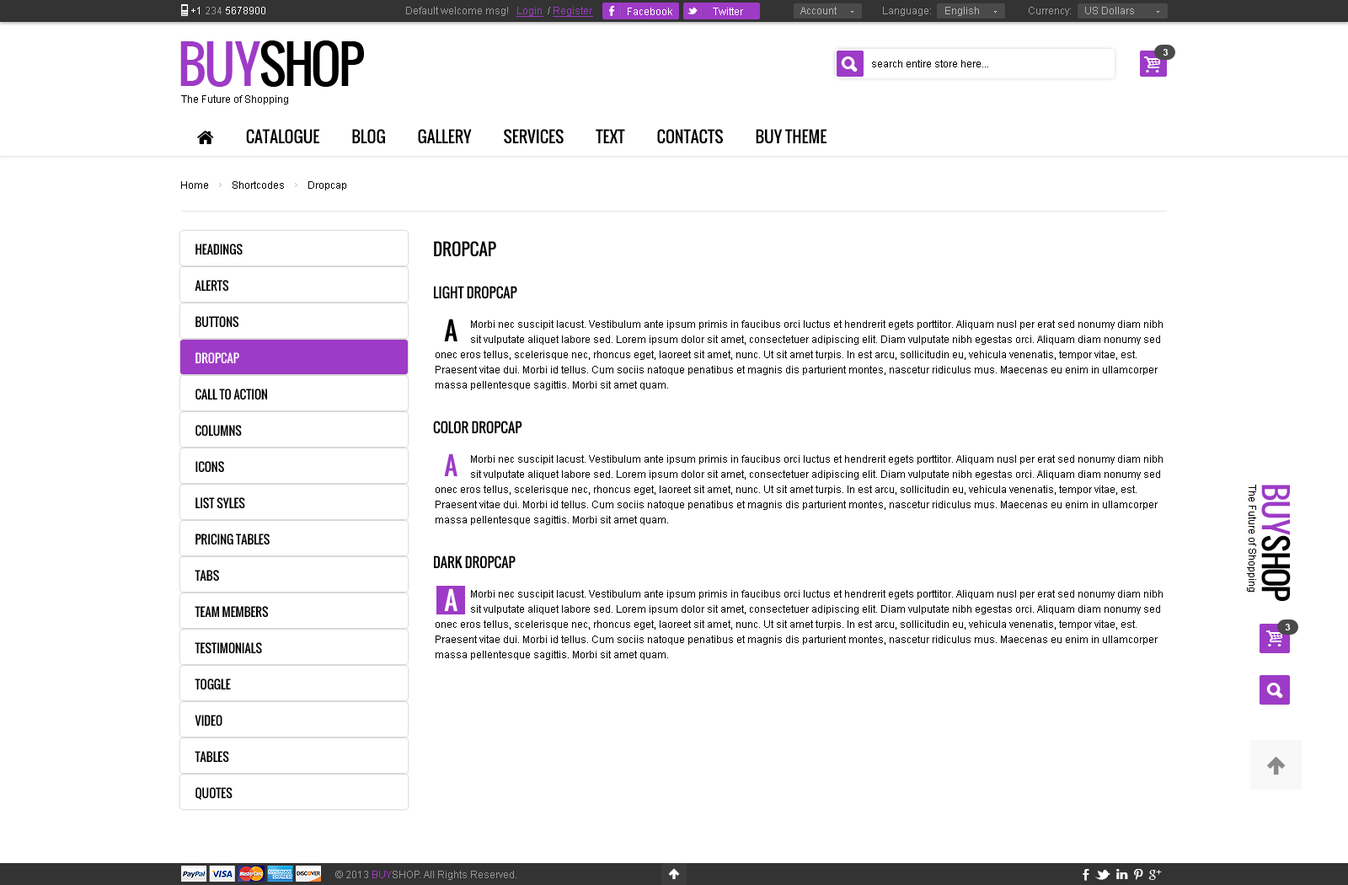
<style>
.page{position:relative;width:1348px;height:885px;background:#ffffff}
.page>*{position:absolute;margin:0}
.t1{font:10.1px "ArialMT";color:#ffffff}
.t2{font:10.1px "ArialMT";color:#9b9b9b}
.t3{font:10.1px "ArialMT";color:#9d3bc6;text-decoration:underline}
.t4{font:10.1px "ArialMT";color:#b6b6b6}
.t5{font:50.5px "Oswald";letter-spacing:-0.06em;color:#000000;text-transform:uppercase}
.t6{font:50.5px "Oswald";letter-spacing:-0.06em;color:#9d3bc6;text-transform:uppercase}
.t7{font:9.3px "Arial-BoldMT";color:#ffffff;text-transform:uppercase}
.t8{font:10.1px "ArialMT";color:#000000}
.t9{font:11.8px/36.2px "Oswald";color:#000000;text-transform:uppercase}
.t10{font:11.8px/36.2px "Oswald";color:#ffffff;text-transform:uppercase}
.t11{font:16.8px "Oswald";color:#000000;text-transform:uppercase}
.t12{font:13.5px "Oswald";color:#000000;text-transform:uppercase}
.t13{font:25.3px "Oswald";color:#000000}
.t14{font:10.1px/15.2px "ArialMT";color:#000000}
.t15{font:25.3px "Oswald";color:#9d3bc6}
.t16{font:32px "Oswald";letter-spacing:-0.06em;color:#000000;text-transform:uppercase}
.t17{font:32px "Oswald";letter-spacing:-0.06em;color:#9d3bc6;text-transform:uppercase}
.t18{font:25.3px "Oswald";color:#ffffff}
.t19{font:10.1px "ArialMT";color:#959595}
.t20{font:10.1px "ArialMT";color:#9d3bc6}
</style>
<div class="page">
<p class="t1" style="left:191px;top:7px;width:74px;height:7px">+1 <span class="t2">234 </span>5678900</p>
<p class="t2" style="left:406px;top:7px;width:187px;height:10px">Default welcome msg!   <span class="t3">Login </span> / <span class="t3">Register</span></p>
<p class="t2" style="left:406px;top:7px;width:187px;height:10px">Default welcome msg!   <span class="t3">Login </span> / <span class="t3">Register</span></p>
<p class="t1" style="left:628px;top:8px;width:44px;height:7px">Facebook</p>
<p class="t1" style="left:713px;top:8px;width:30px;height:7px">Twitter</p>
<p class="t4" style="left:800px;top:7px;width:37px;height:7px">Account</p>
<p class="t2" style="left:883px;top:7px;width:96px;height:9px">Language:     <span class="t4">English</span></p>
<p class="t4" style="left:1029px;top:7px;width:105px;height:9px"><span class="t2">Currency:     </span>US Dollars</p>
<p class="t5" style="left:180px;top:40px;width:184px;height:47px"><span class="t6">buy</span>shop</p>
<p class="t7" style="left:1163px;top:49px;width:6px;height:7px">3</p>
<p class="t8" style="left:872px;top:60px;width:116px;height:7px">search entire store here...</p>
<p class="t8" style="left:181px;top:95px;width:107px;height:9px">The Future of Shopping</p>
<p class="t8" style="left:181px;top:181px;width:165px;height:9px">Home         Shortcodes         Dropcap</p>
<p class="t9" style="left:195px;top:243px;width:75px;height:557px">Headings<br>Alerts<br>Buttons<br><span class="t10">Dropcap<br></span>Call To Action<br>Columns<br>Icons<br>List syles<br>Pricing Tables<br>Tabs<br>Team Members<br>Testimonials<br>Toggle<br>Video<br>Tables<br>Quotes</p>
<p class="t11" style="left:434px;top:241px;width:62px;height:16px">Dropcap</p>
<p class="t12" style="left:434px;top:286px;width:83px;height:13px">LIGHT DROPCAP</p>
<p class="t13" style="left:444px;top:318px;width:13px;height:23px">A</p>
<p class="t14" style="left:471px;top:320px;width:692px;height:25px">Morbi nec suscipit lacust. Vestibulum ante ipsum primis in faucibus orci luctus et hendrerit egets porttitor. Aliquam nusl per erat sed nonumy diam nibh sit vulputate aliquet labore sed. Lorem ipsum dolor sit amet, consectetuer adipiscing elit. Diam vulputate nibh egestas orci. Aliquam diam nonumy sed</p>
<p class="t14" style="left:436px;top:350px;width:722px;height:40px">onec eros tellus, scelerisque nec, rhoncus eget, laoreet sit amet, nunc. Ut sit amet turpis. In est arcu, sollicitudin eu, vehicula venenatis, tempor vitae, est. Praesent vitae dui. Morbi id tellus. Cum sociis natoque penatibus et magnis dis parturient montes, nascetur ridiculus mus. Maecenas eu enim in ullamcorper massa pellentesque sagittis. Morbi sit amet quam.</p>
<p class="t12" style="left:433px;top:420px;width:89px;height:14px">COLOR DROPCAP</p>
<p class="t15" style="left:444px;top:453px;width:13px;height:23px">A</p>
<p class="t14" style="left:471px;top:455px;width:692px;height:24px">Morbi nec suscipit lacust. Vestibulum ante ipsum primis in faucibus orci luctus et hendrerit egets porttitor. Aliquam nusl per erat sed nonumy diam nibh sit vulputate aliquet labore sed. Lorem ipsum dolor sit amet, consectetuer adipiscing elit. Diam vulputate nibh egestas orci. Aliquam diam nonumy sed</p>
<p class="t14" style="left:436px;top:485px;width:722px;height:40px">onec eros tellus, scelerisque nec, rhoncus eget, laoreet sit amet, nunc. Ut sit amet turpis. In est arcu, sollicitudin eu, vehicula venenatis, tempor vitae, est. Praesent vitae dui. Morbi id tellus. Cum sociis natoque penatibus et magnis dis parturient montes, nascetur ridiculus mus. Maecenas eu enim in ullamcorper massa pellentesque sagittis. Morbi sit amet quam.</p>
<p class="t8" style="left:1247px;top:484px;width:9px;height:107px;rotate:90deg">The Future of Shopping</p>
<p class="t16" style="left:1261px;top:484px;width:30px;height:117px;rotate:90deg"><span class="t17">buy</span>shop</p>
<p class="t12" style="left:434px;top:555px;width:82px;height:14px">Dark DROPCAP</p>
<p class="t18" style="left:444px;top:588px;width:13px;height:23px">A</p>
<p class="t14" style="left:471px;top:590px;width:692px;height:24px">Morbi nec suscipit lacust. Vestibulum ante ipsum primis in faucibus orci luctus et hendrerit egets porttitor. Aliquam nusl per erat sed nonumy diam nibh sit vulputate aliquet labore sed. Lorem ipsum dolor sit amet, consectetuer adipiscing elit. Diam vulputate nibh egestas orci. Aliquam diam nonumy sed</p>
<p class="t14" style="left:436px;top:620px;width:722px;height:40px">onec eros tellus, scelerisque nec, rhoncus eget, laoreet sit amet, nunc. Ut sit amet turpis. In est arcu, sollicitudin eu, vehicula venenatis, tempor vitae, est. Praesent vitae dui. Morbi id tellus. Cum sociis natoque penatibus et magnis dis parturient montes, nascetur ridiculus mus. Maecenas eu enim in ullamcorper massa pellentesque sagittis. Morbi sit amet quam.</p>
<p class="t7" style="left:1285px;top:623px;width:6px;height:7px">3</p>
<p class="t19" style="left:335px;top:870px;width:181px;height:10px">© 2013 <span class="t20">BUY</span>SHOP. All Rights Reserved.</p>
</div>
